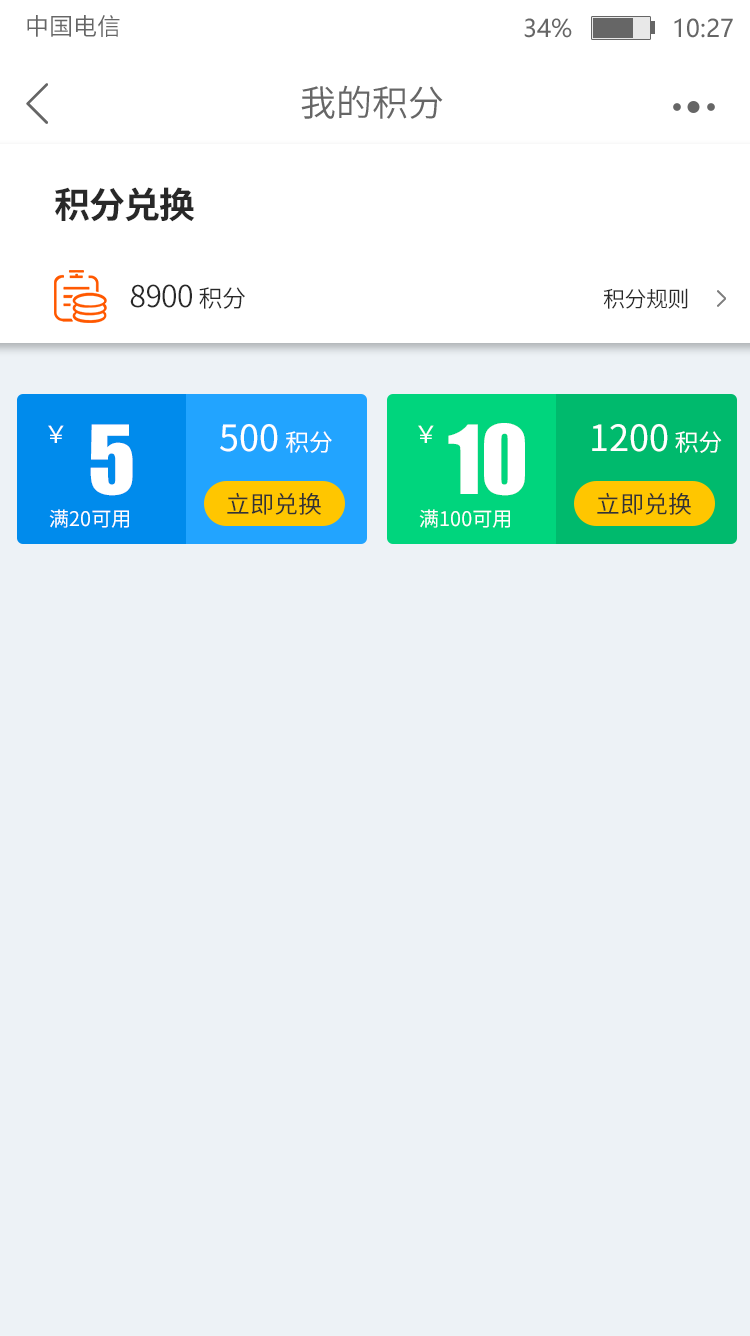
<style>
.page{position:relative;width:750px;height:1336px;background:#edf2f6}
.page>*{position:absolute;margin:0}
.t1{font:24px "SourceHanSansCN-Normal";color:#666666}
.t2{font:24px "MicrosoftYaHei";color:#666666}
.t3{font:36px "SourceHanSansCN-Normal";color:#666666}
.t4{font:36px "SourceHanSansCN-Bold";letter-spacing:-0.025em;color:#282828}
.t5{font:30px "SourceHanSansCN-Normal";letter-spacing:-0.025em;color:#282828}
.t6{font:24px "SourceHanSansCN-Normal";letter-spacing:-0.025em;color:#282828}
.t7{font:22px "SourceHanSansCN-Normal";letter-spacing:-0.025em;color:#282828}
.t8{font:24px "SourceHanSansCN-Regular";color:#ffffff}
.t9{font:88px "Impact";color:#ffffff}
.t10{font:61.5px "SourceHanSansCN-Regular";color:#ffffff}
.t11{font:36px "SourceHanSansCN-Regular";color:#ffffff}
.t12{font:24px "SourceHanSansCN-Regular";color:#333333}
.t13{font:20px "SourceHanSansCN-Regular";color:#ffffff}
</style>
<div class="page">
<p class="t1" style="left:27px;top:15px;width:93px;height:22px">中国电信</p>
<p class="t2" style="left:524px;top:18px;width:209px;height:20px">34%              10:27</p>
<p class="t3" style="left:301px;top:85px;width:142px;height:34px">我的积分</p>
<p class="t4" style="left:55px;top:187px;width:140px;height:35px">积分兑换</p>
<p class="t5" style="left:130px;top:284px;width:115px;height:25px">8900 <span class="t6">积分</span></p>
<p class="t7" style="left:603px;top:288px;width:85px;height:21px">积分规则</p>
<p class="t8" style="left:48px;top:425px;width:16px;height:18px">￥</p>
<p class="t9" style="left:90px;top:424px;width:43px;height:72px"><span class="t10"> </span>5</p>
<p class="t11" style="left:220px;top:424px;width:112px;height:29px">500 <span class="t8">积分</span></p>
<p class="t8" style="left:418px;top:425px;width:16px;height:18px">￥</p>
<p class="t9" style="left:448px;top:423px;width:77px;height:73px"><span class="t10"> </span>10</p>
<p class="t11" style="left:592px;top:424px;width:130px;height:29px">1200 <span class="t8">积分</span></p>
<p class="t12" style="left:227px;top:492px;width:94px;height:23px">立即兑换</p>
<p class="t12" style="left:597px;top:492px;width:94px;height:23px">立即兑换</p>
<p class="t13" style="left:49px;top:509px;width:80px;height:19px">满20可用</p>
<p class="t13" style="left:419px;top:509px;width:91px;height:19px">满100可用</p>
</div>
